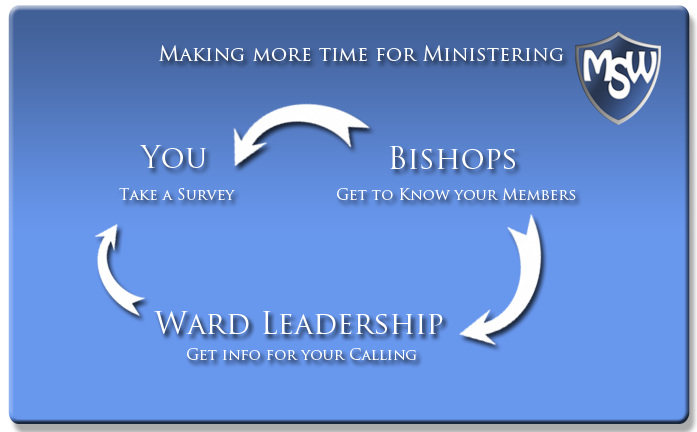
<style>
.page{position:relative;width:697px;height:432px;background:#6898ee}
.page>*{position:absolute;margin:0}
.t1{font:20.2px "TrajanPro-Regular";color:#ffffff;font-variant:small-caps}
.t2{font:30px "TrajanPro-Regular";color:#ffffff;font-variant:small-caps}
.t3{font:15.2px "TrajanPro-Regular";color:#ffffff;font-variant:small-caps}
</style>
<div class="page">
<p class="t1" style="left:159px;top:45px;width:405px;height:16px">Making more time for Ministering</p>
<p class="t2" style="left:140px;top:145px;width:66px;height:23px">You</p>
<p class="t2" style="left:390px;top:146px;width:125px;height:23px">Bishops</p>
<p class="t3" style="left:119px;top:188px;width:116px;height:12px">Take a Survey</p>
<p class="t3" style="left:337px;top:188px;width:239px;height:12px">Get to Know your Members</p>
<p class="t2" style="left:154px;top:311px;width:289px;height:24px">Ward Leadership</p>
<p class="t3" style="left:187px;top:348px;width:230px;height:12px">Get info for your Calling</p>
</div>
